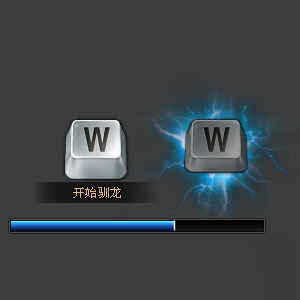
<style>
.page{position:relative;width:300px;height:300px;background:#3d3d3d}
.page>*{position:absolute;margin:0}
.t1{font:54.3px "SimHei"}
.t2{font:12px "SimSun";color:#e2b86e}
</style>
<div class="page">
<p class="t1" style="left:83px;top:127px;width:27px;height:25px">w</p>
<p class="t2" style="left:73px;top:187px;width:48px;height:11px">开始驯龙</p>
</div>
